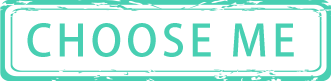
<style>
.page{position:relative;width:331px;height:81px;background:#ffffff}
.page>*{position:absolute;margin:0}
.t1{font:43px "AdobeHeitiStd-Regular";letter-spacing:0.1em;color:#48cfb2;text-transform:uppercase}
</style>
<div class="page">
<p class="t1" style="left:27px;top:23px;width:267px;height:34px">Choose me</p>
</div>
